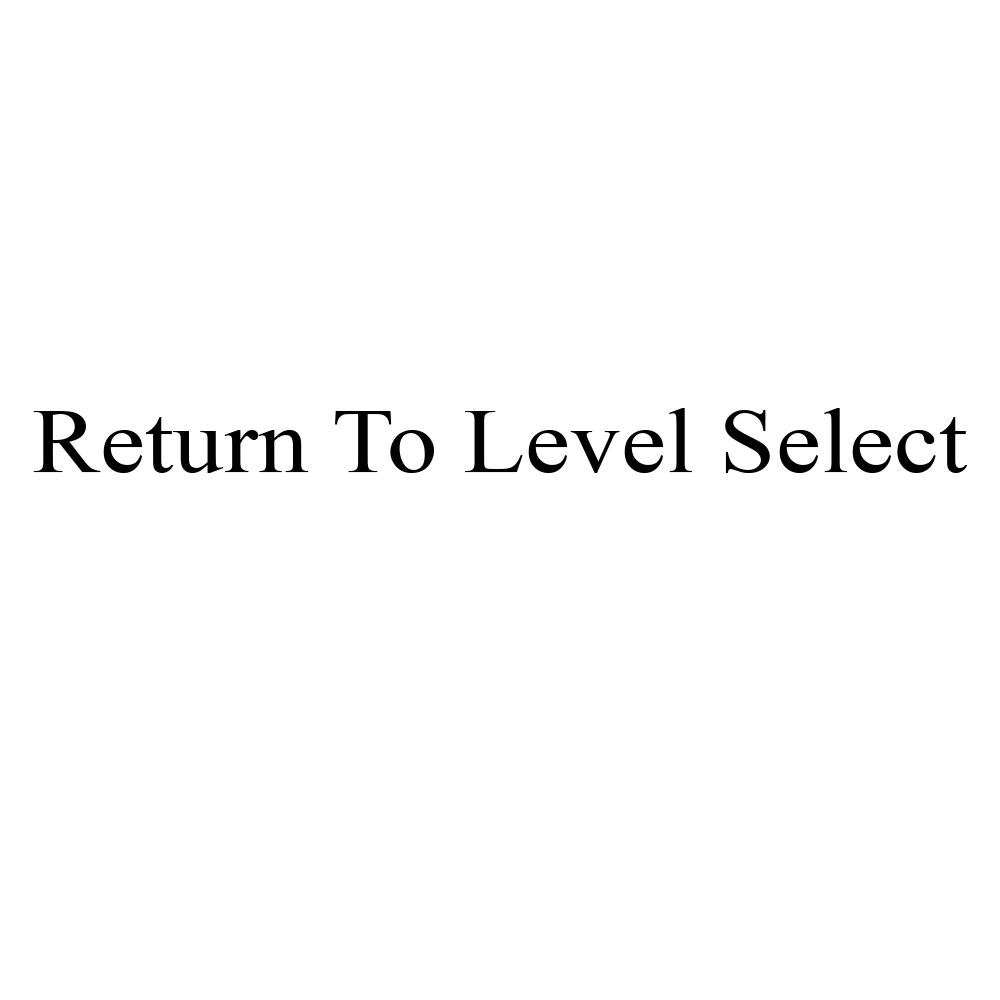
<style>
.page{position:relative;width:1000px;height:1000px;background:#ffffff}
.page>*{position:absolute;margin:0}
.t1{font:91.6px "TimesNewRomanPSMT";color:#000000;scale:1.11 1}
</style>
<div class="page">
<p class="t1" style="left:33px;top:408px;width:935px;height:65px">Return To Level Select</p>
</div>
